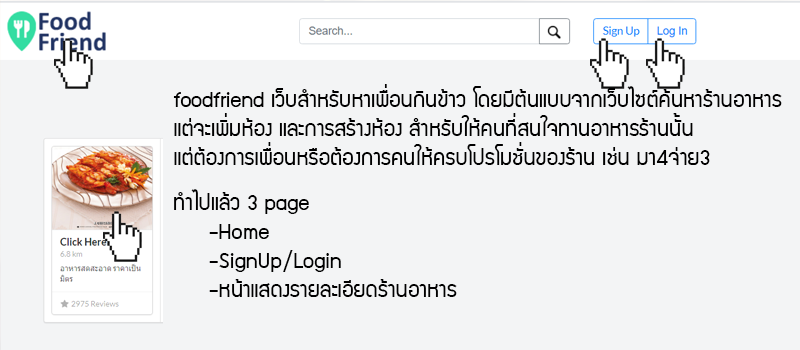
<style>
.page{position:relative;width:800px;height:350px;background:#f3f4f5}
.page>*{position:absolute;margin:0}
.t1{font:24px "supermarket";color:#000000}
</style>
<div class="page">
<p class="t1" style="left:173px;top:84px;width:609px;height:81px">foodfriend เว็บสำหรับหาเพื่อนกินข้าว โดยมีต้นแบบจากเว็บไซต์ค้นหาร้านอาหาร<br>แต่จะเพิ่มห้อง และการสร้างห้อง สำหรับให้คนที่สนใจทานอาหารร้านนั้น <br>แต่ต้องการเพื่อนหรือต้องการคนให้ครบโปรโมชั่นของร้าน เช่น มา4จ่าย3</p>
<p class="t1" style="left:174px;top:189px;width:283px;height:108px">ทำไปแล้ว 3 page<br> -Home<br> -SignUp/Login<br> -หน้าแสดงรายละเอัียดร้านอาหาร</p>
</div>
